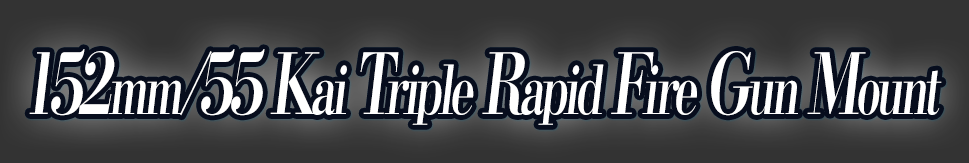
<style>
.page{position:relative;width:969px;height:163px;background:#333333}
.page>*{position:absolute;margin:0}
.t1{font:84px "KochoStd-Heavy";letter-spacing:-0.08em;color:#ffffff;font-style:italic;scale:0.67 1}
.t2{font:67.2px "KochoStd-Heavy";letter-spacing:-0.08em;color:#ffffff;font-style:italic;scale:0.67 1}
</style>
<div class="page">
<p class="t1" style="left:29px;top:49px;width:913px;height:76px">152<span class="t2">mm</span>/55 K<span class="t2">ai </span>T<span class="t2">riple </span>R<span class="t2">apid </span>F<span class="t2">ire </span>G<span class="t2">un </span>M<span class="t2">ount</span></p>
</div>
